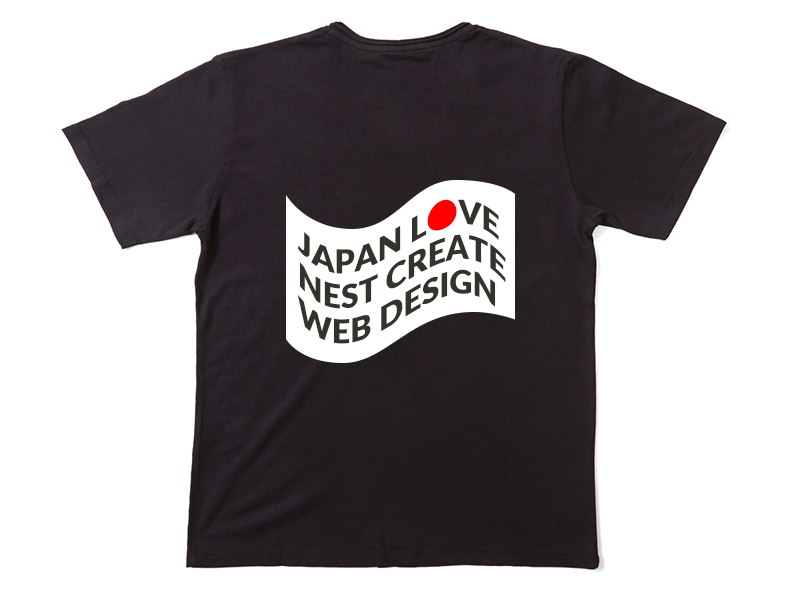
<style>
.page{position:relative;width:800px;height:600px;background:#ffffff}
.page>*{position:absolute;margin:0}
.t1{font:32px/25px "Lato-Black";color:#34322b}
.t2{font:32px/25px "KozGoPr6N-Regular";color:#ff0000}
</style>
<div class="page">
<p class="t1" style="left:297px;top:199px;width:209px;height:145px;text-align:justify">JAPAN L<span class="t2">●</span>VE<br>NEST CREATE<br>WEB DESIGN</p>
</div>
